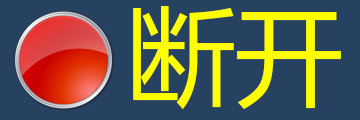
<style>
.page{position:relative;width:360px;height:120px;background:#274161}
.page>*{position:absolute;margin:0}
.t1{font:108px "MicrosoftYaHei";color:#ffff00}
</style>
<div class="page">
<p class="t1" style="left:133px;top:6px;width:208px;height:103px">断开</p>
</div>
